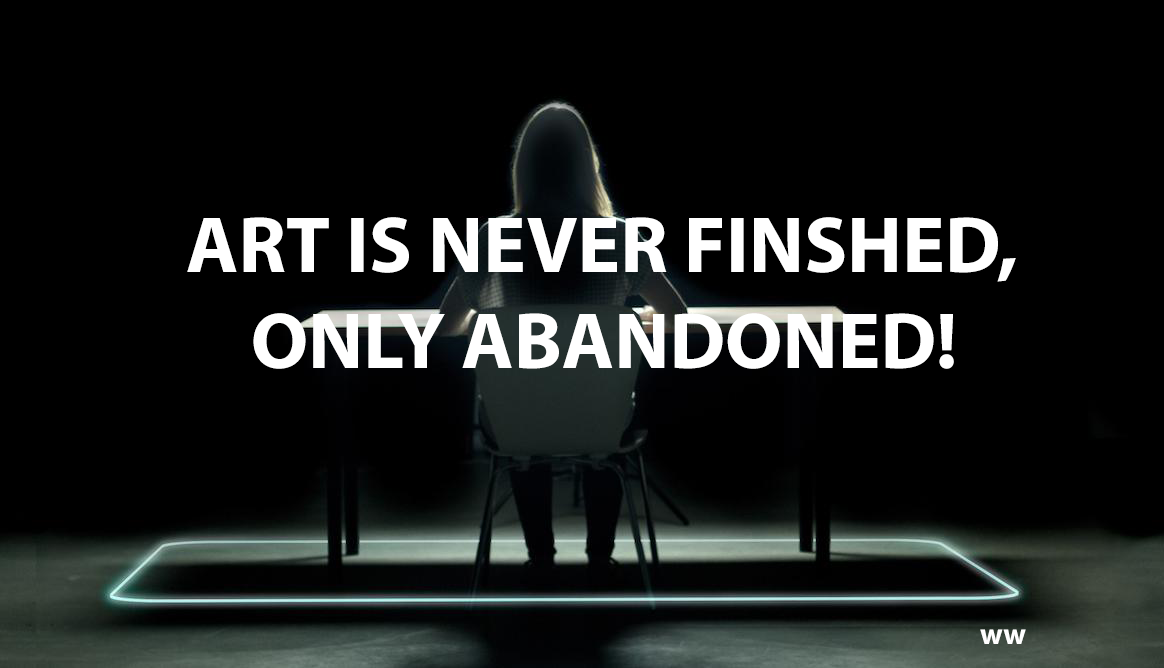
<style>
.page{position:relative;width:1164px;height:668px;background:#000000}
.page>*{position:absolute;margin:0}
.t1{font:80px "MyriadPro-Bold";color:#ffffff}
.t2{font:30px "MyriadPro-Bold";color:#ffffff}
</style>
<div class="page">
<p class="t1" style="left:187px;top:217px;width:829px;height:152px">ART IS NEVER FINSHED,<br>    ONLY ABANDONED!</p>
<p class="t2" style="left:980px;top:629px;width:46px;height:15px">ww</p>
</div>
